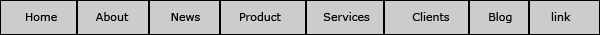
<style>
.page{position:relative;width:600px;height:35px;background:#cccccc}
.page>*{position:absolute;margin:0}
.t1{font:11px "Verdana";color:#000000}
</style>
<div class="page">
<p class="t1" style="left:26px;top:12px;width:545px;height:11px">Home          About           News          Product           Services           Clients          Blog          link</p>
<p class="t1" style="left:26px;top:12px;width:545px;height:11px">Home          About           News          Product           Services           Clients          Blog          link</p>
</div>
